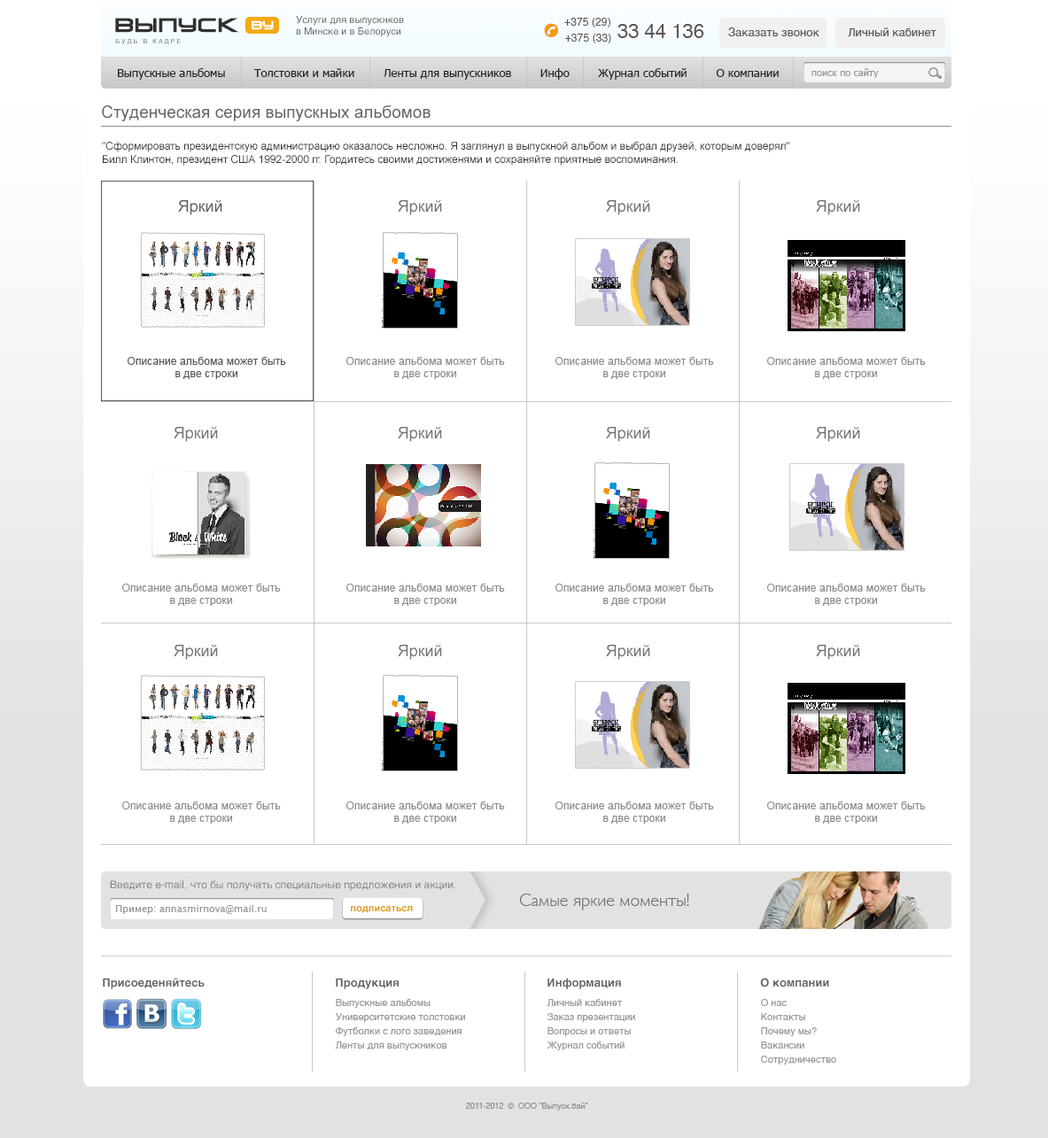
<style>
.page{position:relative;width:1048px;height:1138px;background:#ffffff}
.page>*{position:absolute;margin:0}
.t1{font:18.6px "VenusRisingCyrillic";letter-spacing:0.01em;color:#313131;font-weight:bold}
.t2{font:9.7px "Helvetica";color:#616161}
.t3{font:10.6px "Helvetica";letter-spacing:0.01em;color:#5f5555}
.t4{font:11.2px "VenusRisingCyrillic";letter-spacing:0.01em;color:#ffffff;font-weight:bold}
.t5{font:19.5px "Helvetica";color:#5f5555}
.t6{font:11.5px "Helvetica";color:#5f5555}
.t7{font:6.2px "Helvetica";letter-spacing:0.3em;color:#6d6d6d;text-transform:uppercase}
.t8{font:11.5px "Tahoma";color:#242424}
.t9{font:9.7px "Tahoma";color:#979999}
.t10{font:16.8px "ArialMT";color:#666666}
.t11{font:10.6px "ArialMT";color:#333333}
.t12{font:15.9px "ArialMT";color:#5e5e5e}
.t13{font:15.9px "ArialMT";color:#747474}
.t14{font:10.6px "ArialMT";letter-spacing:0.01em;color:#595959}
.t15{font:10.6px "ArialMT";letter-spacing:0.01em;color:#8d8d8d}
.t16{font:10.6px "Helvetica";color:#848484}
.t17{font:17.7px "GillSans-Light";color:#6f6f6f}
.t18{font:9.7px "LucidaGrande";color:#979797}
.t19{font:9.7px "Helvetica-Bold";color:#e09b0e}
.t20{font:11.5px "Helvetica-Bold";color:#666666}
.t21{font:9.7px/14.2px "Helvetica";color:#979797}
.t22{font:8px "Helvetica";color:#909090}
</style>
<div class="page">
<p class="t1" style="left:115px;top:18px;width:123px;height:15px">ВЫпуск</p>
<p class="t2" style="left:296px;top:16px;width:108px;height:21px">Услуги для выпускнков<br>в Минске и в Белоруси</p>
<p class="t3" style="left:564px;top:18px;width:46px;height:9px">+375 (29)</p>
<p class="t4" style="left:252px;top:20px;width:22px;height:10px">by</p>
<p class="t5" style="left:617px;top:24px;width:87px;height:14px">33 44 136</p>
<p class="t6" style="left:728px;top:27px;width:208px;height:9px">Заказать звонок         Личный кабинет</p>
<p class="t7" style="left:115px;top:39px;width:66px;height:5px">будь в кадре</p>
<p class="t3" style="left:565px;top:34px;width:46px;height:9px">+375 (33)</p>
<p class="t8" style="left:118px;top:68px;width:661px;height:12px">Выпускные альбомы        Толстовки и майки        Ленты для выпускников        Инфо        Журнал событий        О компании</p>
<p class="t9" style="left:811px;top:68px;width:68px;height:10px">поиск по сайту</p>
<p class="t10" style="left:102px;top:105px;width:328px;height:16px">Cтуденческая серия выпускных альбомов</p>
<p class="t11" style="left:102px;top:142px;width:688px;height:24px">"Сформировать президентскую администрацию оказалось несложно. Я заглянул в выпускной альбом и выбрал друзей, которым доверял"<br>Билл Клинтон, президент США 1992-2000 гг. Гордитесь своими достиженями и сохраняйте приятные воспоминания.</p>
<p class="t12" style="left:178px;top:200px;width:44px;height:15px">Яркий</p>
<p class="t13" style="left:398px;top:200px;width:44px;height:15px">Яркий</p>
<p class="t13" style="left:606px;top:200px;width:44px;height:15px">Яркий</p>
<p class="t13" style="left:816px;top:200px;width:44px;height:15px">Яркий</p>
<p class="t14" style="left:128px;top:357px;width:158px;height:22px;text-align:center">Описание альбома может быть<br>в две строки</p>
<p class="t15" style="left:346px;top:357px;width:159px;height:22px;text-align:center">Описание альбома может быть<br>в две строки</p>
<p class="t15" style="left:555px;top:357px;width:159px;height:22px;text-align:center">Описание альбома может быть<br>в две строки</p>
<p class="t15" style="left:767px;top:357px;width:159px;height:22px;text-align:center">Описание альбома может быть<br>в две строки</p>
<p class="t13" style="left:174px;top:427px;width:44px;height:15px">Яркий</p>
<p class="t13" style="left:398px;top:427px;width:44px;height:15px">Яркий</p>
<p class="t13" style="left:606px;top:427px;width:44px;height:15px">Яркий</p>
<p class="t13" style="left:816px;top:427px;width:44px;height:15px">Яркий</p>
<p class="t15" style="left:122px;top:584px;width:159px;height:22px;text-align:center">Описание альбома может быть<br>в две строки</p>
<p class="t15" style="left:346px;top:584px;width:159px;height:22px;text-align:center">Описание альбома может быть<br>в две строки</p>
<p class="t15" style="left:555px;top:584px;width:159px;height:22px;text-align:center">Описание альбома может быть<br>в две строки</p>
<p class="t15" style="left:767px;top:584px;width:159px;height:22px;text-align:center">Описание альбома может быть<br>в две строки</p>
<p class="t13" style="left:174px;top:645px;width:44px;height:15px">Яркий</p>
<p class="t13" style="left:398px;top:645px;width:44px;height:15px">Яркий</p>
<p class="t13" style="left:606px;top:645px;width:44px;height:15px">Яркий</p>
<p class="t13" style="left:816px;top:645px;width:44px;height:15px">Яркий</p>
<p class="t15" style="left:122px;top:802px;width:159px;height:22px;text-align:center">Описание альбома может быть<br>в две строки</p>
<p class="t15" style="left:346px;top:802px;width:159px;height:22px;text-align:center">Описание альбома может быть<br>в две строки</p>
<p class="t15" style="left:555px;top:802px;width:159px;height:22px;text-align:center">Описание альбома может быть<br>в две строки</p>
<p class="t15" style="left:767px;top:802px;width:159px;height:22px;text-align:center">Описание альбома может быть<br>в две строки</p>
<p class="t16" style="left:110px;top:880px;width:345px;height:11px">Введите e-mail, что бы получать специальные предложения и акции.</p>
<p class="t17" style="left:519px;top:894px;width:170px;height:16px">Самые яркие моменты!</p>
<p class="t18" style="left:115px;top:905px;width:152px;height:9px">Пример: annasmirnova@mail.ru</p>
<p class="t19" style="left:351px;top:906px;width:62px;height:7px">подписаться</p>
<p class="t20" style="left:103px;top:978px;width:102px;height:11px">Присоеденяйтесь</p>
<p class="t20" style="left:336px;top:978px;width:63px;height:11px">Продукция</p>
<p class="t20" style="left:547px;top:978px;width:74px;height:11px">Информация</p>
<p class="t20" style="left:760px;top:978px;width:69px;height:10px">О компании</p>
<p class="t21" style="left:335px;top:999px;width:130px;height:51px">Выпускные альбомы<br>Университетские толстовки<br>Футболки с лого заведения<br>Ленты для выпускников</p>
<p class="t21" style="left:546px;top:999px;width:89px;height:51px">Личный кабинет<br>Заказ презентации<br>Вопросы и ответы<br>Журнал событий</p>
<p class="t21" style="left:761px;top:999px;width:75px;height:66px">О нас<br>Контакты<br>Почему мы? <br>Вакансии<br>Сотрудничество</p>
<p class="t22" style="left:466px;top:1103px;width:122px;height:8px">2011-2012  ©  ООО “Выпуск.бай”</p>
</div>
